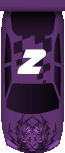
<style>
.page{position:relative;width:65px;height:153px}
.page>*{position:absolute;margin:0}
.t1{font:36.9px "Thunderstrike";color:#ffffff}
</style>
<div class="page">
<p class="t1" style="left:17px;top:49px;width:29px;height:25px">2</p>
</div>
